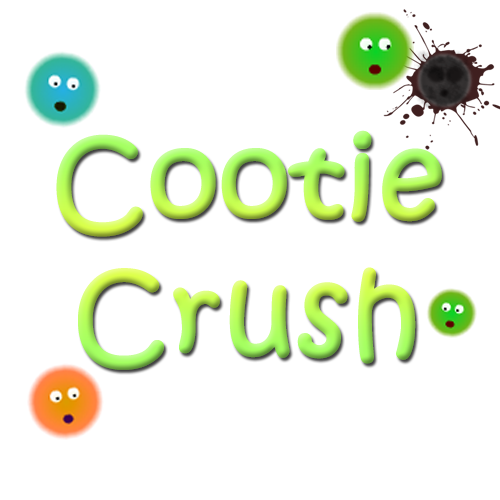
<style>
.page{position:relative;width:500px;height:500px;background:#ffffff}
.page>*{position:absolute;margin:0}
.t1{font:111.1px "KristenITC-Regular";font-weight:bold}
</style>
<div class="page">
<p class="t1" style="left:56px;top:130px;width:386px;height:240px;text-align:center">Cootie<br>Crush</p>
</div>
